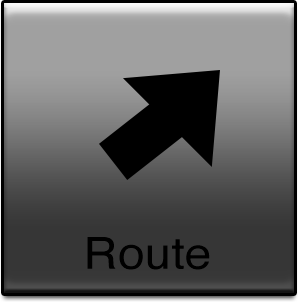
<style>
.page{position:relative;width:298px;height:302px}
.page>*{position:absolute;margin:0}
.t1{font:44px "Helvetica";color:#000000;scale:1.09 1}
</style>
<div class="page">
<p class="t1" style="left:87px;top:237px;width:123px;height:33px">Route</p>
</div>
